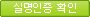
<style>
.page{position:relative;width:90px;height:17px}
.page>*{position:absolute;margin:0}
.t1{font:12px "morris9";letter-spacing:-0.03em;color:#ffffff}
</style>
<div class="page">
<p class="t1" style="left:14px;top:3px;width:62px;height:10px">실명인증 확인</p>
</div>
